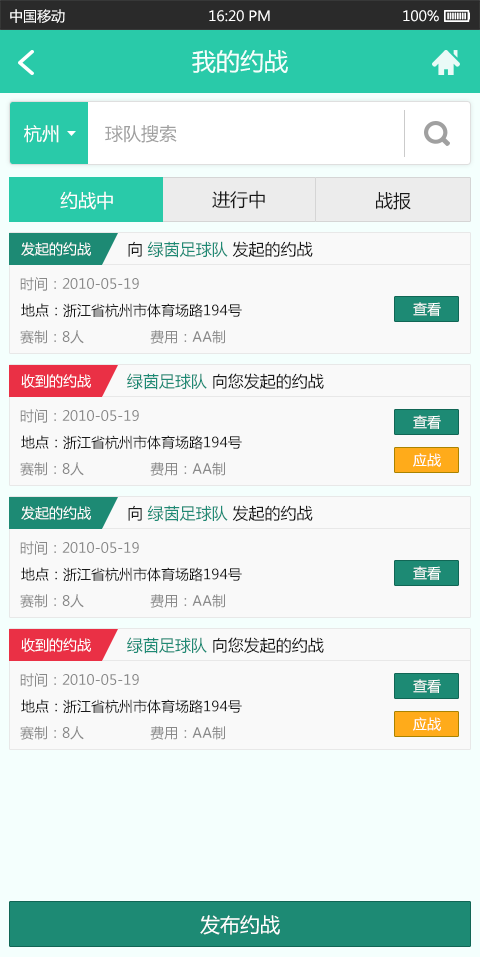
<style>
.page{position:relative;width:480px;height:957px;background:#f9f9f9}
.page>*{position:absolute;margin:0}
.t1{font:14px "MicrosoftYaHei";color:#ffffff}
.t2{font:24px "MicrosoftYaHei";color:#f4fffd}
.t3{font:18px "MicrosoftYaHei";color:#ffffff}
.t4{font:18px "MicrosoftYaHei";color:#a0a0a0}
.t5{font:18px "MicrosoftYaHei";color:#191919}
.t6{font:16px "MicrosoftYaHei";color:#1d8a74}
.t7{font:16px "MicrosoftYaHei";color:#191919}
.t8{font:14px "MicrosoftYaHei";color:#898989}
.t9{font:14px "MicrosoftYaHei";color:#191919}
.t10{font:20px "MicrosoftYaHei";color:#ffffff}
</style>
<div class="page">
<p class="t1" style="left:10px;top:9px;width:55px;height:14px">中国移动</p>
<p class="t1" style="left:209px;top:10px;width:61px;height:12px">16:20 PM</p>
<p class="t1" style="left:403px;top:10px;width:36px;height:12px">100%</p>
<p class="t2" style="left:192px;top:50px;width:96px;height:23px">我的约战</p>
<p class="t3" style="left:24px;top:125px;width:35px;height:18px">杭州</p>
<p class="t4" style="left:105px;top:125px;width:72px;height:18px">球队搜索</p>
<p class="t3" style="left:60px;top:191px;width:53px;height:19px">约战中</p>
<p class="t5" style="left:212px;top:190px;width:53px;height:19px">进行中</p>
<p class="t5" style="left:376px;top:192px;width:35px;height:18px">战报</p>
<p class="t1" style="left:21px;top:242px;width:70px;height:14px">发起的约战</p>
<p class="t6" style="left:128px;top:241px;width:185px;height:17px"><span class="t7">向 </span>绿茵足球队<span class="t7"> 发起的约战</span></p>
<p class="t8" style="left:20px;top:277px;width:119px;height:14px">时间：2010-05-19</p>
<p class="t9" style="left:21px;top:303px;width:221px;height:15px">地点：浙江省杭州市体育场路194号</p>
<p class="t1" style="left:413px;top:302px;width:28px;height:14px">查看</p>
<p class="t8" style="left:20px;top:330px;width:205px;height:14px">赛制：8人                费用：AA制</p>
<p class="t1" style="left:21px;top:374px;width:70px;height:14px">收到的约战</p>
<p class="t7" style="left:127px;top:373px;width:197px;height:17px"><span class="t6">绿茵足球队 </span>向您发起的约战</p>
<p class="t8" style="left:20px;top:409px;width:119px;height:14px">时间：2010-05-19</p>
<p class="t1" style="left:413px;top:415px;width:28px;height:14px">查看</p>
<p class="t9" style="left:21px;top:435px;width:221px;height:15px">地点：浙江省杭州市体育场路194号</p>
<p class="t8" style="left:20px;top:462px;width:205px;height:14px">赛制：8人                费用：AA制</p>
<p class="t1" style="left:413px;top:453px;width:28px;height:14px">应战</p>
<p class="t1" style="left:21px;top:506px;width:70px;height:14px">发起的约战</p>
<p class="t6" style="left:128px;top:505px;width:185px;height:17px"><span class="t7">向 </span>绿茵足球队<span class="t7"> 发起的约战</span></p>
<p class="t8" style="left:20px;top:541px;width:119px;height:14px">时间：2010-05-19</p>
<p class="t9" style="left:21px;top:567px;width:221px;height:15px">地点：浙江省杭州市体育场路194号</p>
<p class="t1" style="left:413px;top:566px;width:28px;height:14px">查看</p>
<p class="t8" style="left:20px;top:594px;width:205px;height:14px">赛制：8人                费用：AA制</p>
<p class="t1" style="left:21px;top:638px;width:70px;height:14px">收到的约战</p>
<p class="t7" style="left:127px;top:637px;width:197px;height:17px"><span class="t6">绿茵足球队 </span>向您发起的约战</p>
<p class="t8" style="left:20px;top:673px;width:119px;height:14px">时间：2010-05-19</p>
<p class="t1" style="left:413px;top:679px;width:28px;height:14px">查看</p>
<p class="t9" style="left:21px;top:699px;width:221px;height:15px">地点：浙江省杭州市体育场路194号</p>
<p class="t8" style="left:20px;top:726px;width:205px;height:14px">赛制：8人                费用：AA制</p>
<p class="t1" style="left:413px;top:717px;width:28px;height:14px">应战</p>
<p class="t10" style="left:200px;top:915px;width:80px;height:20px">发布约战</p>
</div>
